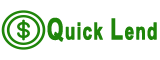
<style>
.page{position:relative;width:160px;height:60px;background:#ffffff}
.page>*{position:absolute;margin:0}
.t1{font:23.3px "Arial-BoldMT";letter-spacing:0.06em;color:#1f850a;font-weight:bold;scale:0.71 1}
.t2{font:29.2px "Arial-BoldMT";letter-spacing:0.06em;color:#1f850a;font-weight:bold;scale:0.71 1}
</style>
<div class="page">
<p class="t1" style="left:47px;top:17px;width:110px;height:25px"><span class="t2">Q</span>uick <span class="t2">L</span>end</p>
</div>
